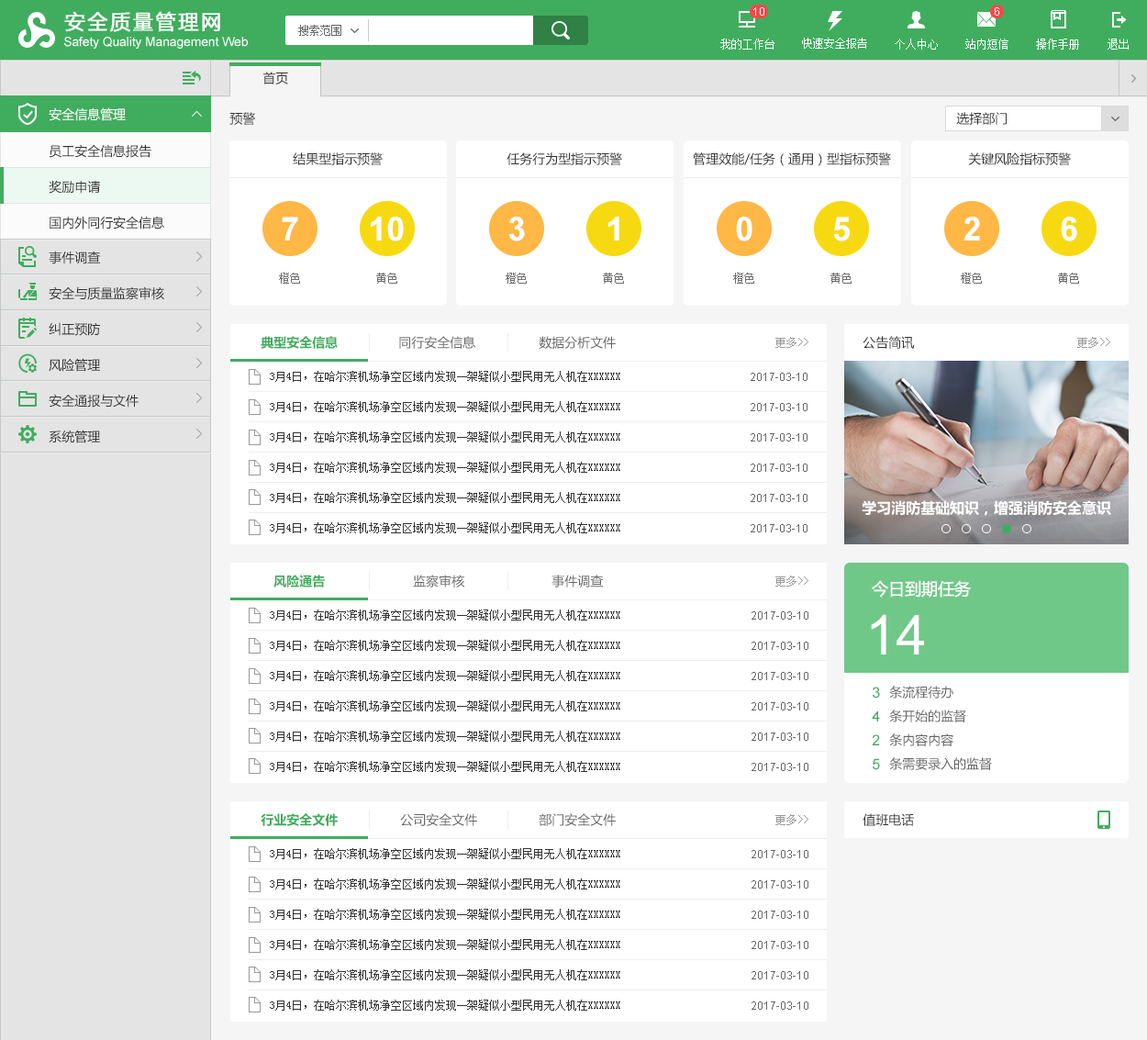
<style>
.page{position:relative;width:1147px;height:1040px;background:#ffffff}
.page>*{position:absolute;margin:0}
.t1{font:12.8px "MicrosoftYaHei";color:#333333}
.t2{font:12.8px "MicrosoftYaHei";color:#ffffff}
.t3{font:12.8px/35.8px "MicrosoftYaHei";color:#333333}
.t4{font:33px "Arial-BoldMT";color:#ffffff}
.t5{font:11px "SimSun";color:#6e6e6e}
.t6{font:12.8px "MicrosoftYaHei-Bold";color:#40ad5e}
.t7{font:12.8px "MicrosoftYaHei";color:#666666}
.t8{font:11px "SimSun";color:#999999}
.t9{font:11px/30.3px "SimSun";color:#333333}
.t10{font:11px/30.3px "ArialMT";color:#666666}
.t11{font:14.7px "MicrosoftYaHei-Bold";color:#ffffff}
.t12{font:16.5px "MicrosoftYaHei";color:#ffffff}
.t13{font:55.1px "ArialMT";color:#ffffff}
.t14{font:14.7px/23.9px "ArialMT";color:#40ad5e}
.t15{font:12.8px/23.9px "MicrosoftYaHei";color:#666666}
</style>
<div class="page">
<p class="t1" style="left:262px;top:72px;width:26px;height:12px">首页</p>
<p class="t2" style="left:49px;top:107px;width:77px;height:14px">安全信息管理</p>
<p class="t1" style="left:229px;top:112px;width:26px;height:13px">预警</p>
<p class="t1" style="left:956px;top:112px;width:51px;height:13px">选择部门</p>
<p class="t3" style="left:49px;top:144px;width:115px;height:85px">员工安全信息报告<br>奖励申请<br>国内外同行安全信息</p>
<p class="t1" style="left:293px;top:152px;width:90px;height:13px">结果型指示预警</p>
<p class="t1" style="left:507px;top:152px;width:115px;height:13px">任务行为型指示预警</p>
<p class="t1" style="left:693px;top:152px;width:198px;height:14px">管理效能/任务（通用）型指标预警</p>
<p class="t1" style="left:968px;top:152px;width:103px;height:13px">关键风险指标预警</p>
<p class="t4" style="left:282px;top:217px;width:16px;height:23px">7</p>
<p class="t4" style="left:371px;top:217px;width:33px;height:24px">10</p>
<p class="t4" style="left:508px;top:217px;width:17px;height:24px">3</p>
<p class="t4" style="left:608px;top:217px;width:11px;height:23px">1</p>
<p class="t4" style="left:736px;top:217px;width:16px;height:24px">0</p>
<p class="t4" style="left:833px;top:217px;width:17px;height:24px">5</p>
<p class="t4" style="left:963px;top:217px;width:17px;height:23px">2</p>
<p class="t4" style="left:1061px;top:217px;width:16px;height:24px">6</p>
<p class="t3" style="left:49px;top:251px;width:115px;height:192px">事件调查<br>安全与质量监察审核<br>纠正预防<br>风险管理<br>安全通报与文件<br>系统管理</p>
<p class="t5" style="left:279px;top:273px;width:21px;height:11px">橙色</p>
<p class="t5" style="left:376px;top:273px;width:21px;height:11px">黄色</p>
<p class="t5" style="left:506px;top:273px;width:21px;height:11px">橙色</p>
<p class="t5" style="left:603px;top:273px;width:21px;height:11px">黄色</p>
<p class="t5" style="left:733px;top:273px;width:21px;height:11px">橙色</p>
<p class="t5" style="left:830px;top:273px;width:22px;height:11px">黄色</p>
<p class="t5" style="left:961px;top:273px;width:21px;height:11px">橙色</p>
<p class="t5" style="left:1058px;top:273px;width:21px;height:11px">黄色</p>
<p class="t6" style="left:261px;top:336px;width:77px;height:13px">典型安全信息</p>
<p class="t7" style="left:399px;top:336px;width:76px;height:13px">同行安全信息</p>
<p class="t7" style="left:539px;top:336px;width:77px;height:13px">数据分析文件</p>
<p class="t8" style="left:775px;top:337px;width:33px;height:11px">更多&gt;&gt;</p>
<p class="t1" style="left:863px;top:336px;width:51px;height:13px">公告简讯</p>
<p class="t8" style="left:1077px;top:337px;width:33px;height:11px">更多&gt;&gt;</p>
<p class="t9" style="left:270px;top:371px;width:350px;height:162px">3月4日，在哈尔滨机场净空区域内发现一架疑似小型民用无人机在XXXXXX<br>3月4日，在哈尔滨机场净空区域内发现一架疑似小型民用无人机在XXXXXX<br>3月4日，在哈尔滨机场净空区域内发现一架疑似小型民用无人机在XXXXXX<br>3月4日，在哈尔滨机场净空区域内发现一架疑似小型民用无人机在XXXXXX<br>3月4日，在哈尔滨机场净空区域内发现一架疑似小型民用无人机在XXXXXX<br>3月4日，在哈尔滨机场净空区域内发现一架疑似小型民用无人机在XXXXXX</p>
<p class="t10" style="left:751px;top:373px;width:56px;height:159px;text-align:right">2017-03-10<br>2017-03-10<br>2017-03-10<br>2017-03-10<br>2017-03-10<br>2017-03-10</p>
<p class="t11" style="left:862px;top:500px;width:249px;height:16px">学习消防基础知识，增强消防安全意识</p>
<p class="t6" style="left:273px;top:574px;width:52px;height:13px">风险通告</p>
<p class="t7" style="left:413px;top:574px;width:51px;height:13px">监察审核</p>
<p class="t7" style="left:551px;top:574px;width:52px;height:13px">事件调查</p>
<p class="t8" style="left:775px;top:575px;width:33px;height:11px">更多&gt;&gt;</p>
<p class="t12" style="left:872px;top:580px;width:99px;height:17px">今日到期任务</p>
<p class="t9" style="left:270px;top:609px;width:350px;height:163px">3月4日，在哈尔滨机场净空区域内发现一架疑似小型民用无人机在XXXXXX<br>3月4日，在哈尔滨机场净空区域内发现一架疑似小型民用无人机在XXXXXX<br>3月4日，在哈尔滨机场净空区域内发现一架疑似小型民用无人机在XXXXXX<br>3月4日，在哈尔滨机场净空区域内发现一架疑似小型民用无人机在XXXXXX<br>3月4日，在哈尔滨机场净空区域内发现一架疑似小型民用无人机在XXXXXX<br>3月4日，在哈尔滨机场净空区域内发现一架疑似小型民用无人机在XXXXXX</p>
<p class="t10" style="left:752px;top:611px;width:56px;height:160px">2017-03-10<br>2017-03-10<br>2017-03-10<br>2017-03-10<br>2017-03-10<br>2017-03-10</p>
<p class="t13" style="left:871px;top:614px;width:53px;height:40px">14</p>
<p class="t14" style="left:872px;top:686px;width:8px;height:84px">3<br>4<br>2<br>5</p>
<p class="t15" style="left:889px;top:685px;width:103px;height:85px">条流程待办<br>条开始的监督<br>条内容内容<br>条需要录入的监督</p>
<p class="t6" style="left:261px;top:813px;width:77px;height:13px">行业安全文件</p>
<p class="t7" style="left:400px;top:813px;width:77px;height:13px">公司安全文件</p>
<p class="t7" style="left:539px;top:813px;width:77px;height:13px">部门安全文件</p>
<p class="t8" style="left:775px;top:814px;width:33px;height:11px">更多&gt;&gt;</p>
<p class="t1" style="left:863px;top:813px;width:51px;height:13px">值班电话</p>
<p class="t9" style="left:270px;top:848px;width:350px;height:162px">3月4日，在哈尔滨机场净空区域内发现一架疑似小型民用无人机在XXXXXX<br>3月4日，在哈尔滨机场净空区域内发现一架疑似小型民用无人机在XXXXXX<br>3月4日，在哈尔滨机场净空区域内发现一架疑似小型民用无人机在XXXXXX<br>3月4日，在哈尔滨机场净空区域内发现一架疑似小型民用无人机在XXXXXX<br>3月4日，在哈尔滨机场净空区域内发现一架疑似小型民用无人机在XXXXXX<br>3月4日，在哈尔滨机场净空区域内发现一架疑似小型民用无人机在XXXXXX</p>
<p class="t10" style="left:752px;top:850px;width:56px;height:159px">2017-03-10<br>2017-03-10<br>2017-03-10<br>2017-03-10<br>2017-03-10<br>2017-03-10</p>
</div>
